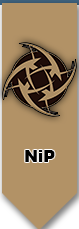
<style>
.page{position:relative;width:79px;height:229px;background:#b29266}
.page>*{position:absolute;margin:0}
.t1{font:16.7px "Arial-Black";letter-spacing:-0.01em;color:#000000}
</style>
<div class="page">
<p class="t1" style="left:25px;top:150px;width:30px;height:12px">NiP</p>
</div>
